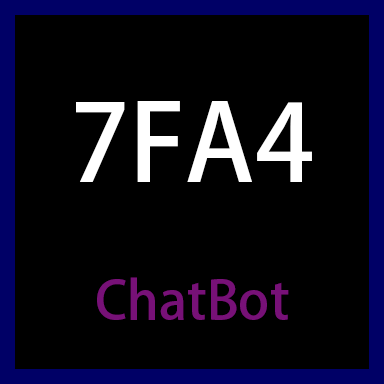
<style>
.page{position:relative;width:384px;height:384px;background:#000000}
.page>*{position:absolute;margin:0}
.t1{font:52.9px "AdobeHeitiStd-Regular";color:#771177}
.t2{font:52.9px "AdobeHeitiStd-Regular";color:#ffffff}
.t3{font:105.8px "AdobeHeitiStd-Regular";color:#ffffff}
</style>
<div class="page">
<p class="t1" style="left:76px;top:101px;width:236px;height:219px;text-align:center"><span class="t2"><br></span><span class="t3">7FA4<br></span>ChatBot</p>
</div>
